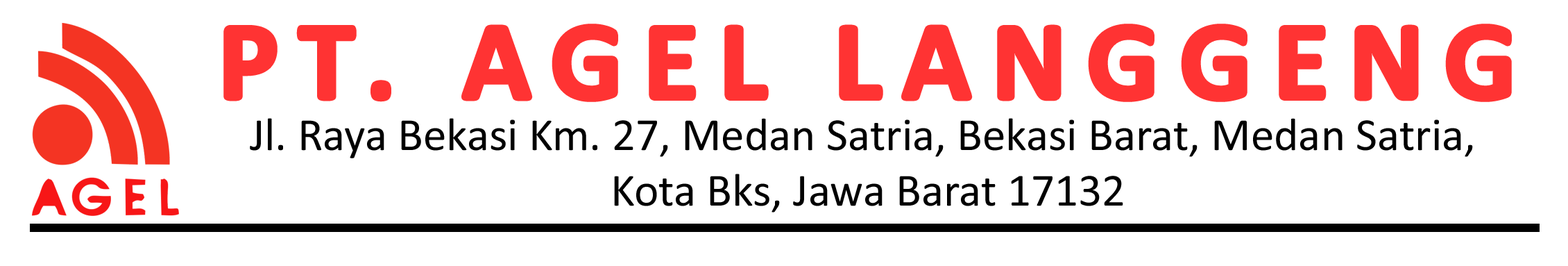
<style>
.page{position:relative;width:1568px;height:266px;background:#ffffff}
.page>*{position:absolute;margin:0}
.t1{font:113.4px "Calibri-Bold";letter-spacing:0.175em;color:#ff3333}
.t2{font:46.3px "Calibri";color:#000000}
</style>
<div class="page">
<p class="t1" style="left:225px;top:26px;width:1285px;height:74px">PT. AGEL LANGGENG</p>
<p class="t2" style="left:250px;top:118px;width:1223px;height:94px;text-align:center">Jl. Raya Bekasi Km. 27, Medan Satria, Bekasi Barat, Medan Satria, <br>Kota Bks, Jawa Barat 17132</p>
</div>
